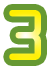
<style>
.page{position:relative;width:50px;height:70px;background:#669933}
.page>*{position:absolute;margin:0}
.t1{font:64px "OCRAStd"}
</style>
<div class="page">
<p class="t1" style="left:9px;top:10px;width:32px;height:50px">3</p>
</div>
